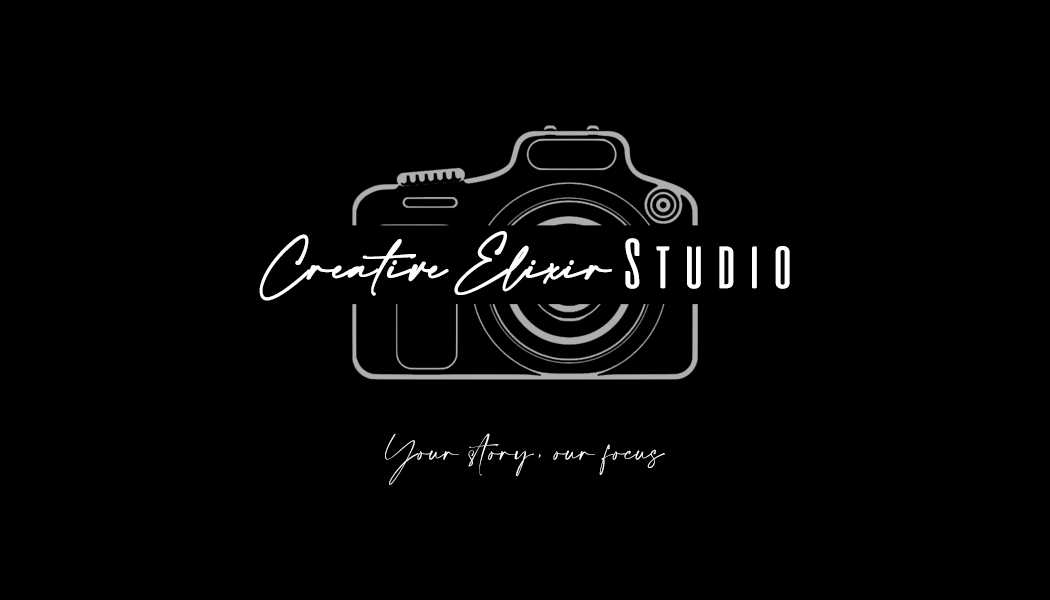
<style>
.page{position:relative;width:1050px;height:600px;background:#000000}
.page>*{position:absolute;margin:0}
.t1{font:31.6px/29.9px "AmalfiCoast";letter-spacing:0.04em;color:#ffffff;font-weight:bold;font-style:italic}
.t2{font:70.8px "aliensandcows";letter-spacing:0.017em;color:#ffffff}
.t3{font:70.8px "aliensandcows";letter-spacing:0.01em;color:#ffffff}
.t4{font:20.8px/41.9px "AmalfiCoast";letter-spacing:0.04em;color:#ffffff}
</style>
<div class="page">
<p class="t1" style="left:259px;top:231px;width:353px;height:70px;text-align:center">Creative Elixir</p>
<p class="t2" style="left:625px;top:238px;width:165px;height:51px"><span class="t3">S</span>tudio</p>
<p class="t4" style="left:385px;top:433px;width:280px;height:52px;text-align:center">Your story, our focus</p>
</div>
